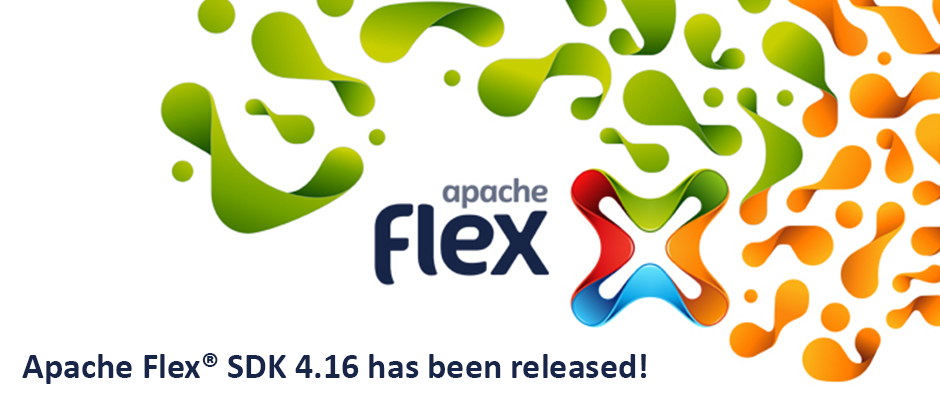
<style>
.page{position:relative;width:940px;height:400px;background:#ffffff}
.page>*{position:absolute;margin:0}
.t1{font:36px "Calibri-Bold";color:#172548}
</style>
<div class="page">
<p class="t1" style="left:22px;top:353px;width:624px;height:31px">Apache Flex® SDK 4.16 has been released!</p>
</div>
